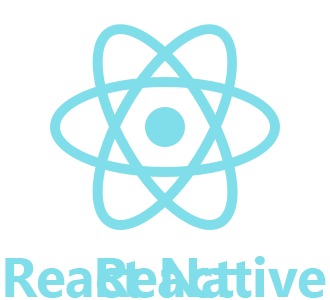
<style>
.page{position:relative;width:330px;height:300px;background:#ffffff}
.page>*{position:absolute;margin:0}
.t1{font:55px "SegoeUI-Bold";color:#80deea}
</style>
<div class="page">
<p class="t1" style="left:5px;top:256px;width:321px;height:42px">React Native</p>
<p class="t1" style="left:97px;top:258px;width:137px;height:40px">React</p>
</div>
